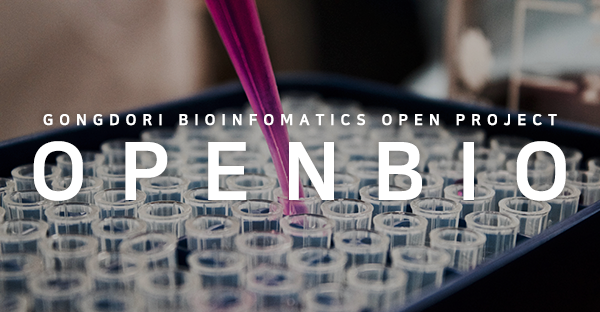
<style>
.page{position:relative;width:600px;height:312px}
.page>*{position:absolute;margin:0}
.t1{font:15px "NanumSquareEB";letter-spacing:0.4em;color:#ffffff}
.t2{font:80px "NanumSquareEB";letter-spacing:0.4em;color:#ffffff}
</style>
<div class="page">
<p class="t1" style="left:43px;top:114px;width:514px;height:12px">GONGDORI BIOINFOMATICS OPEN PROJECT</p>
<p class="t2" style="left:33px;top:141px;width:533px;height:60px">OPENBIO</p>
</div>
